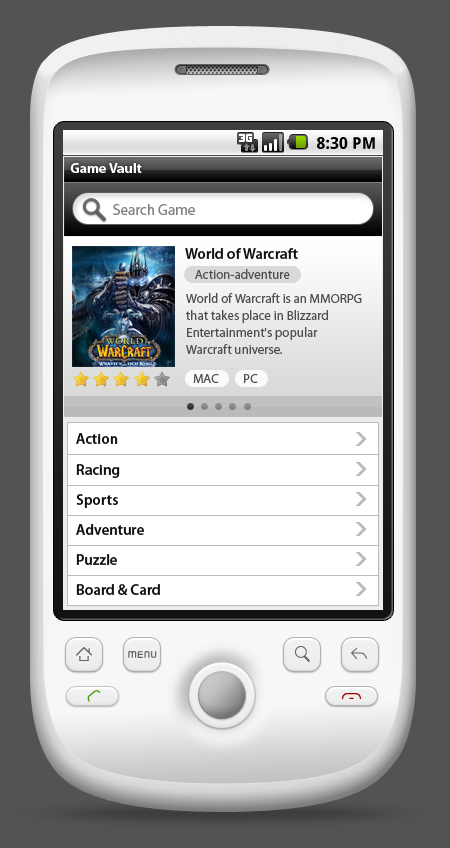
<style>
.page{position:relative;width:450px;height:848px;background:#535353}
.page>*{position:absolute;margin:0}
.t1{font:16px "DroidSans-Bold";letter-spacing:0.005em;color:#000000}
.t2{font:14px "MyriadPro-Bold";color:#ffffff}
.t3{font:15px "MyriadPro-Regular";color:#7f7f7f}
.t4{font:15px "MyriadPro-Semibold";color:#101010}
.t5{font:13px "MyriadPro-Regular";color:#4e4e4e}
.t6{font:13px/17px "MyriadPro-Regular";color:#4e4e4e}
</style>
<div class="page">
<p class="t1" style="left:317px;top:137px;width:58px;height:12px">8:30 PM</p>
<p class="t2" style="left:70px;top:163px;width:72px;height:10px">Game Vault</p>
<p class="t3" style="left:113px;top:204px;width:82px;height:11px">Search Game</p>
<p class="t4" style="left:185px;top:248px;width:113px;height:11px">World of Warcraft</p>
<p class="t5" style="left:195px;top:269px;width:95px;height:10px">Action-adventure</p>
<p class="t6" style="left:186px;top:293px;width:176px;height:61px">World of Warcraft is an MMORPG that takes place in Blizzard Entertainment's popular Warcraft universe.</p>
<p class="t5" style="left:193px;top:374px;width:26px;height:9px">MAC</p>
<p class="t5" style="left:244px;top:374px;width:14px;height:9px">PC</p>
<p class="t4" style="left:76px;top:433px;width:42px;height:11px">Action</p>
<p class="t4" style="left:76px;top:464px;width:44px;height:14px">Racing</p>
<p class="t4" style="left:76px;top:494px;width:42px;height:14px">Sports</p>
<p class="t4" style="left:76px;top:524px;width:68px;height:11px">Adventure</p>
<p class="t4" style="left:76px;top:554px;width:41px;height:11px">Puzzle</p>
<p class="t4" style="left:76px;top:584px;width:84px;height:11px">Board &amp; Card</p>
</div>
